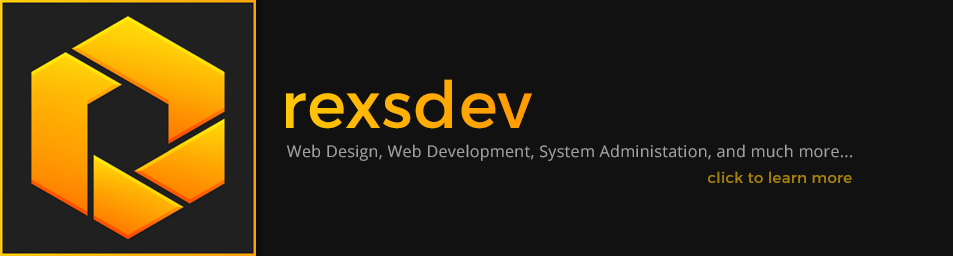
<style>
.page{position:relative;width:953px;height:256px;background:#111111}
.page>*{position:absolute;margin:0}
.t1{font:65px "Montserrat-Regular";letter-spacing:0.02em;color:#ffaf04}
.t2{font:16px "OpenSans";letter-spacing:0.02em;color:#a1a1a1}
.t3{font:15px "Montserrat-Regular";letter-spacing:0.02em;color:#a6820c}
</style>
<div class="page">
<p class="t1" style="left:286px;top:79px;width:246px;height:50px">rexsdev</p>
<p class="t2" style="left:287px;top:144px;width:565px;height:17px">Web Design, Web Development, System Administation, and much more...</p>
<p class="t3" style="left:708px;top:171px;width:144px;height:12px">click to learn more</p>
</div>
